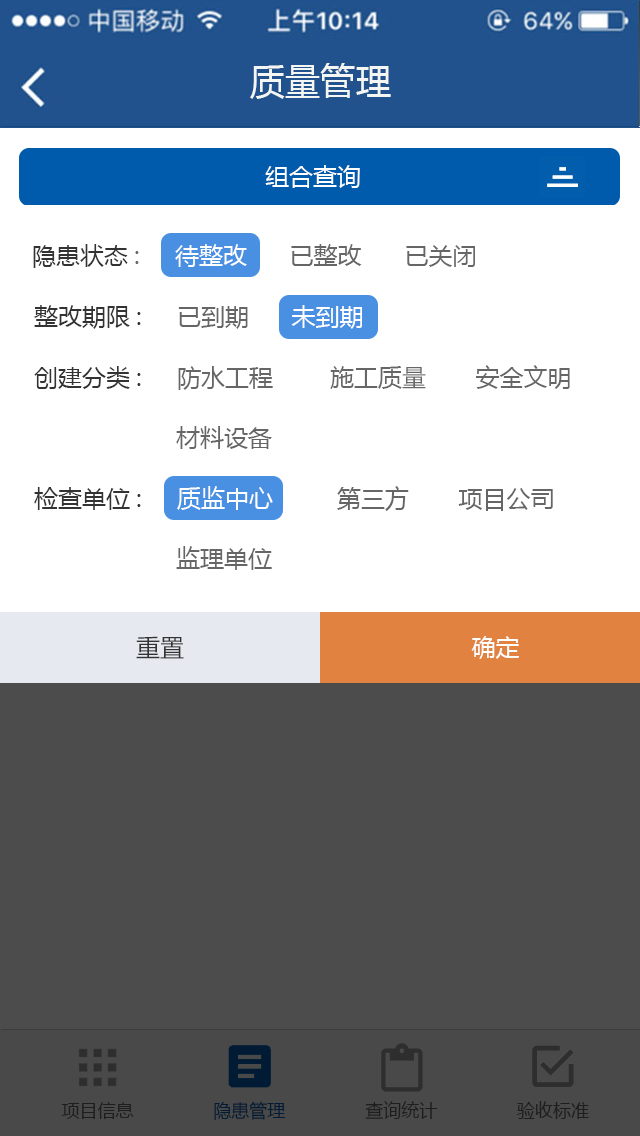
<style>
.page{position:relative;width:640px;height:1136px;background:#ffffff}
.page>*{position:absolute;margin:0}
.t1{font:36px "MicrosoftYaHei";color:#f3f6f3}
.t2{font:24px "MicrosoftYaHei";color:#ffffff}
.t3{font:24px "MicrosoftYaHei";color:#666666}
.t4{font:24px "MicrosoftYaHei";color:#333333}
.t5{font:24px/60px "MicrosoftYaHei";color:#666666}
.t6{font:24px/60px "MicrosoftYaHei";color:#333333}
.t7{font:24px/60px "MicrosoftYaHei";color:#ffffff}
.t8{font:18px "MicrosoftYaHei";color:#1e1e1e}
</style>
<div class="page">
<p class="t1" style="left:250px;top:63px;width:141px;height:36px">质量管理</p>
<p class="t2" style="left:265px;top:165px;width:95px;height:23px">组合查询</p>
<p class="t3" style="left:33px;top:244px;width:442px;height:24px"><span class="t4">隐患状态</span>:     <span class="t2">待整改</span>      已整改      已关闭</p>
<p class="t4" style="left:34px;top:305px;width:328px;height:24px">整改期限:<span class="t3">     已到期      </span><span class="t2">未到期</span></p>
<p class="t5" style="left:34px;top:365px;width:536px;height:84px"><span class="t6">创建分类:</span>     防水工程        施工质量       安全文明<br>                    材料设备</p>
<p class="t5" style="left:34px;top:486px;width:519px;height:84px"><span class="t6">检查单位:     </span><span class="t7">质监中心</span>         第三方       项目公司<br>                    监理单位</p>
<p class="t4" style="left:136px;top:636px;width:48px;height:23px">重置</p>
<p class="t2" style="left:471px;top:636px;width:48px;height:23px">确定</p>
<p class="t8" style="left:61px;top:1101px;width:528px;height:19px">项目信息               隐患管理               查询统计               验收标准</p>
</div>
